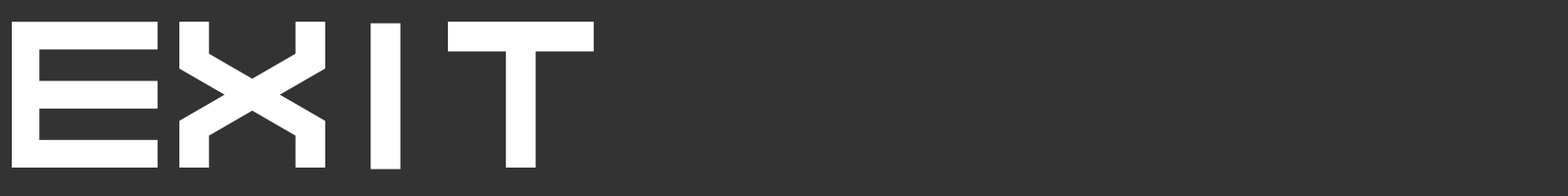
<style>
.page{position:relative;width:1568px;height:196px;background:#333333}
.page>*{position:absolute;margin:0}
.t1{font:166.6px "7THDR2020Regular";color:#ffffff}
</style>
<div class="page">
<p class="t1" style="left:12px;top:22px;width:582px;height:148px">EXIT</p>
</div>
